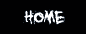
<style>
.page{position:relative;width:86px;height:34px;background:#010102}
.page>*{position:absolute;margin:0}
.t1{font:25px "YouMurdererBB";color:#ffffff}
</style>
<div class="page">
<p class="t1" style="left:23px;top:9px;width:42px;height:16px">Home</p>
</div>
